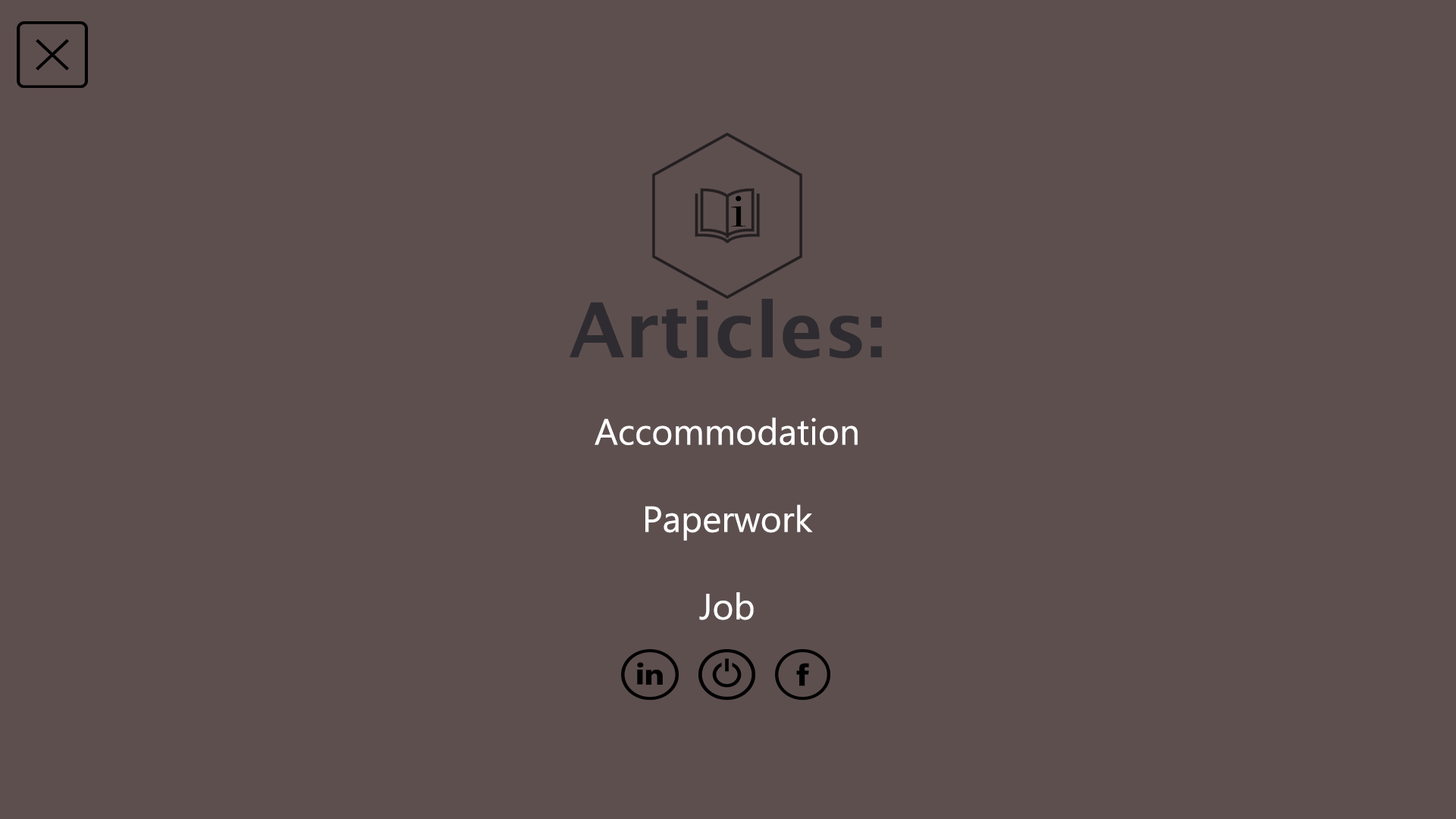
<style>
.page{position:relative;width:1456px;height:819px;background:#5e4f4f}
.page>*{position:absolute;margin:0}
.t1{font:36.4px "Ebrima";color:#ffffff}
.t2{font:75.8px "LucidaSans-Demi";color:#2e2c30}
</style>
<div class="page">
<p class="t1" style="left:570px;top:299px;width:312px;height:321px;text-align:center"><span class="t2">Articles:<br><br></span>Accommodation<br><br>Paperwork<br><br>Job</p>
</div>
